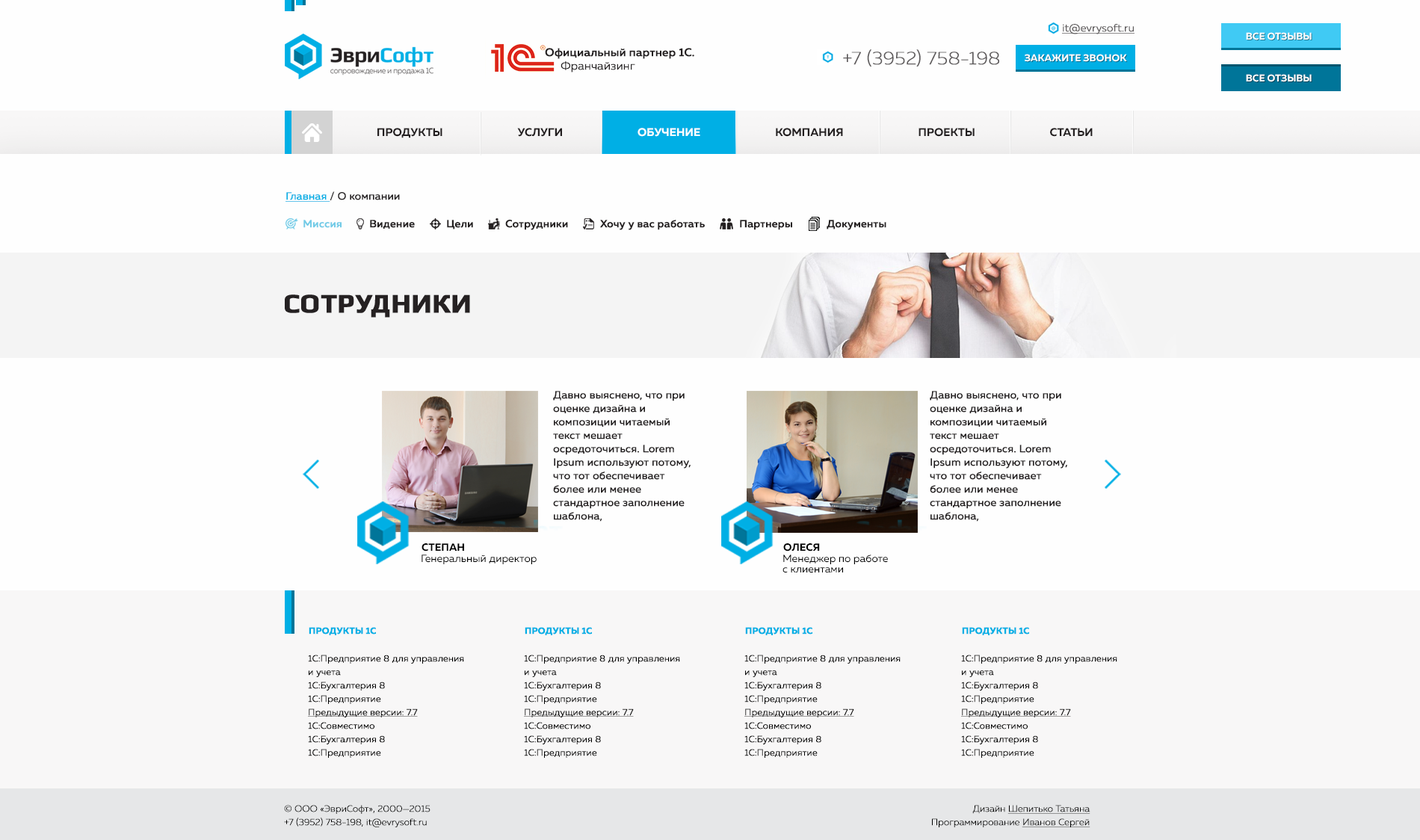
<style>
.page{position:relative;width:1420px;height:840px;background:#fefefe}
.page>*{position:absolute;margin:0}
.t1{font:10.5px "MullerLight";color:#5c595a;font-weight:bold;text-decoration:underline}
.t2{font:9.8px "MullerBold";color:#ffffff}
.t3{font:11.2px/13.5px "MullerMedium";color:#231f20;font-weight:bold}
.t4{font:11.2px/13.5px "MullerLight";color:#231f20;font-weight:bold}
.t5{font:18.3px "MullerUltraLight";color:#5c595a;font-weight:bold}
.t6{font:11.2px "MullerBold";color:#231f20}
.t7{font:11.2px "MullerBold";color:#ffffff}
.t8{font:10.5px "MullerRegular";color:#252122;font-weight:bold}
.t9{font:10.5px "MullerRegular";color:#00afe5;font-weight:bold;text-decoration:underline}
.t10{font:10.5px "MullerMedium";color:#72cbe7;font-weight:bold}
.t11{font:10.5px "MullerMedium";color:#231f20;font-weight:bold}
.t12{font:26.9px "Play-Bold";color:#252122;font-weight:bold}
.t13{font:10.5px/13.5px "MullerRegular";color:#231f20;font-weight:bold}
.t14{font:10.5px "MullerBold";color:#000000}
.t15{font:10.5px "MullerRegular";color:#000000}
.t16{font:10.5px/10.5px "MullerRegular";color:#000000}
.t17{font:9px "MullerBold";color:#00afe5;font-weight:bold}
.t18{font:9px/13.5px "MullerLight";color:#000000;font-weight:bold}
.t19{font:9px/13.5px "MullerLight";color:#000000;font-weight:bold;text-decoration:underline}
.t20{font:9px/13.5px "MullerUltraLight";color:#000000;font-weight:bold}
.t21{font:9px/13.5px "MullerUltraLight";color:#000000;font-weight:bold;text-decoration:underline}
</style>
<div class="page">
<p class="t1" style="left:1062px;top:24px;width:72px;height:10px">it@evrysoft.ru</p>
<p class="t2" style="left:1246px;top:32px;width:65px;height:8px">ВСЕ ОТЗЫВЫ</p>
<p class="t3" style="left:545px;top:48px;width:149px;height:24px">Официальный партнер 1С.<span class="t4"> <br>     Франчайзинг</span></p>
<p class="t5" style="left:843px;top:49px;width:156px;height:18px">+7 (3952) 758-198</p>
<p class="t2" style="left:1024px;top:54px;width:103px;height:8px">ЗАКАЖИТЕ ЗВОНОК</p>
<p class="t2" style="left:1246px;top:74px;width:65px;height:8px">ВСЕ ОТЗЫВЫ</p>
<p class="t6" style="left:377px;top:128px;width:715px;height:10px">ПРОДУКТЫ                              УСЛУГИ                         <span class="t7">     ОБУЧЕНИЕ</span>                              КОМПАНИЯ                              ПРОЕКТЫ                              СТАТЬИ</p>
<p class="t8" style="left:285px;top:191px;width:115px;height:11px"><span class="t9">Главная </span>/ О компании</p>
<p class="t10" style="left:303px;top:220px;width:38px;height:8px">Миссия</p>
<p class="t11" style="left:370px;top:220px;width:45px;height:9px">Видение</p>
<p class="t11" style="left:447px;top:220px;width:26px;height:9px">Цели</p>
<p class="t11" style="left:505px;top:220px;width:63px;height:10px">Сотрудники</p>
<p class="t11" style="left:600px;top:220px;width:105px;height:10px">Хочу у вас работать</p>
<p class="t11" style="left:740px;top:220px;width:52px;height:10px">Партнеры</p>
<p class="t11" style="left:826px;top:220px;width:60px;height:10px">Документы</p>
<p class="t12" style="left:285px;top:294px;width:185px;height:24px">СОТРУДНИКИ</p>
<p class="t13" style="left:553px;top:391px;width:137px;height:131px">Давно выяснено, что при оценке дизайна и композиции читаемый текст мешает осредоточиться. Lorem Ipsum используют потому, что тот обеспечивает более или менее стандартное заполнение шаблона,</p>
<p class="t13" style="left:930px;top:391px;width:137px;height:131px">Давно выяснено, что при оценке дизайна и композиции читаемый текст мешает осредоточиться. Lorem Ipsum используют потому, что тот обеспечивает более или менее стандартное заполнение шаблона,</p>
<p class="t14" style="left:421px;top:543px;width:43px;height:8px">СТЕПАН</p>
<p class="t14" style="left:783px;top:543px;width:37px;height:8px">ОЛЕСЯ</p>
<p class="t15" style="left:421px;top:554px;width:116px;height:10px">Генеральный директор</p>
<p class="t16" style="left:782px;top:554px;width:106px;height:19px">Менеджер по работе<br>с клиентами</p>
<p class="t17" style="left:309px;top:627px;width:67px;height:8px">ПРОДУКТЫ 1С</p>
<p class="t17" style="left:525px;top:627px;width:67px;height:8px">ПРОДУКТЫ 1С</p>
<p class="t17" style="left:745px;top:627px;width:67px;height:8px">ПРОДУКТЫ 1С</p>
<p class="t17" style="left:962px;top:627px;width:67px;height:8px">ПРОДУКТЫ 1С</p>
<p class="t18" style="left:308px;top:655px;width:156px;height:103px">1С:Предприятие 8 для управления и учета<br>1С:Бухгалтерия 8 <br>1С:Предприятие <br><span class="t19">Предыдущие версии: 7.7<br></span>1С:Совместимо<br>1С:Бухгалтерия 8 <br>1С:Предприятие</p>
<p class="t18" style="left:524px;top:655px;width:156px;height:103px">1С:Предприятие 8 для управления и учета<br>1С:Бухгалтерия 8 <br>1С:Предприятие <br><span class="t19">Предыдущие версии: 7.7<br></span>1С:Совместимо<br>1С:Бухгалтерия 8 <br>1С:Предприятие</p>
<p class="t18" style="left:744px;top:655px;width:156px;height:103px">1С:Предприятие 8 для управления и учета<br>1С:Бухгалтерия 8 <br>1С:Предприятие <br><span class="t19">Предыдущие версии: 7.7<br></span>1С:Совместимо<br>1С:Бухгалтерия 8 <br>1С:Предприятие</p>
<p class="t18" style="left:961px;top:655px;width:156px;height:103px">1С:Предприятие 8 для управления и учета<br>1С:Бухгалтерия 8 <br>1С:Предприятие <br><span class="t19">Предыдущие версии: 7.7<br></span>1С:Совместимо<br>1С:Бухгалтерия 8 <br>1С:Предприятие</p>
<p class="t20" style="left:284px;top:805px;width:146px;height:22px">© ООО «ЭвриСофт», 2000—2015<br>+7 (3952) 758-198, it@evrysoft.ru</p>
<p class="t21" style="left:932px;top:805px;width:158px;height:22px;text-align:right"><span class="t20">Дизайн </span>Шепитько Татьяна<br><span class="t20">Программирование </span>Иванов Сергей</p>
</div>
